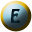
<style>
.page{position:relative;width:32px;height:32px;background:#ffffff}
.page>*{position:absolute;margin:0}
.t1{font:16.7px "HoboStd";color:#091e28}
</style>
<div class="page">
<p class="t1" style="left:11px;top:9px;width:9px;height:14px">E</p>
</div>
